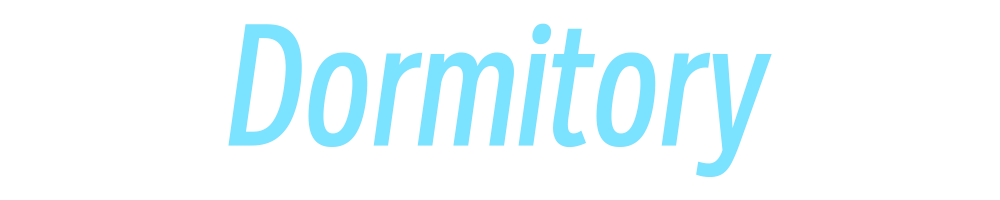
<style>
.page{position:relative;width:1000px;height:200px;background:#ffffff}
.page>*{position:absolute;margin:0}
.t1{font:150px "SmileySans-Oblique";color:#7be2ff}
</style>
<div class="page">
<p class="t1" style="left:228px;top:23px;width:544px;height:154px">Dormitory</p>
</div>
